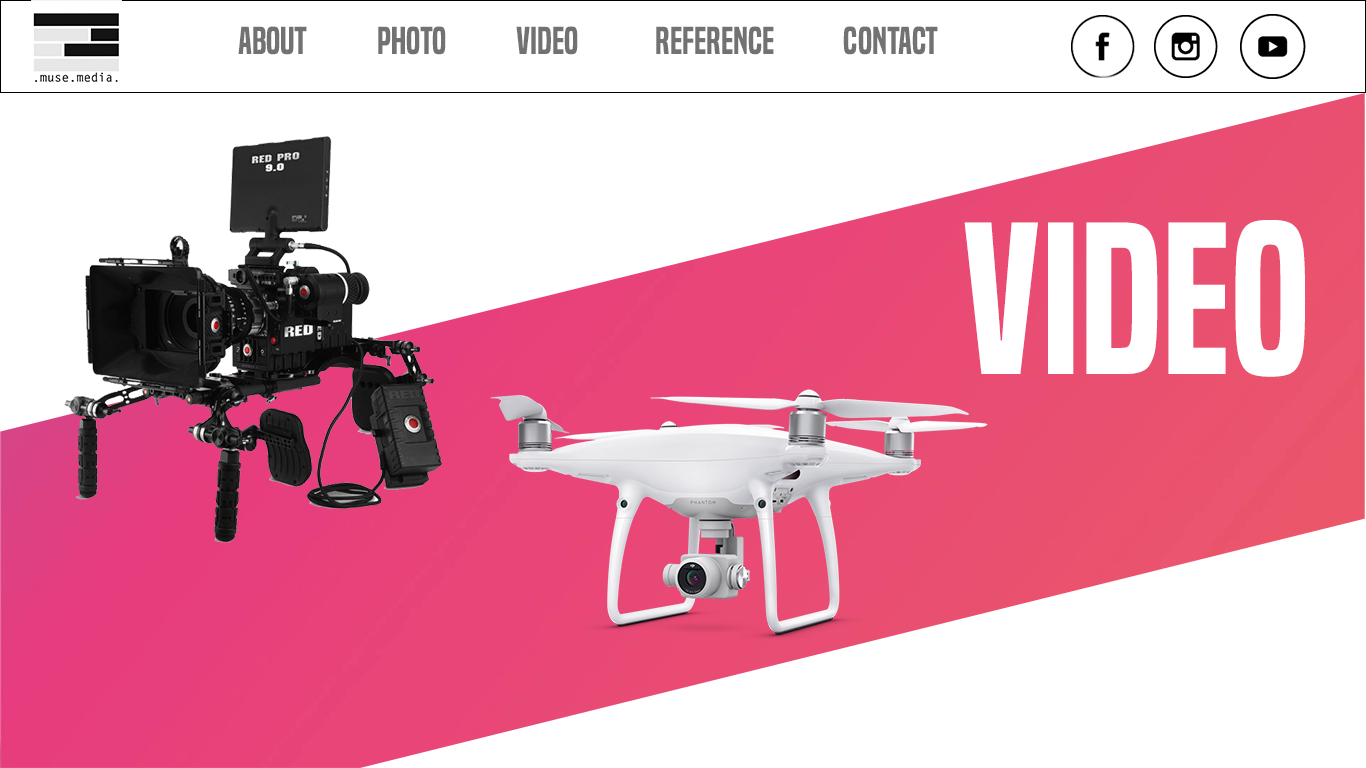
<style>
.page{position:relative;width:1366px;height:768px;background:#ffffff}
.page>*{position:absolute;margin:0}
.t1{font:36px "BuiltTitlingSb-Regular";color:#727272}
.t2{font:200px "BuiltTitlingSb-Regular";color:#ffffff}
</style>
<div class="page">
<p class="t1" style="left:238px;top:26px;width:69px;height:29px">About</p>
<p class="t1" style="left:378px;top:26px;width:68px;height:29px">Photo</p>
<p class="t1" style="left:516px;top:26px;width:62px;height:29px">Video</p>
<p class="t1" style="left:656px;top:26px;width:118px;height:29px">Reference</p>
<p class="t1" style="left:843px;top:26px;width:95px;height:29px">Contact</p>
<p class="t2" style="left:964px;top:220px;width:342px;height:157px">VIDEO</p>
</div>
